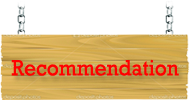
<style>
.page{position:relative;width:190px;height:100px;background:#ffffff}
.page>*{position:absolute;margin:0}
.t1{font:22.4px "Rockwell";color:#ff0100;scale:0.93 1}
</style>
<div class="page">
<p class="t1" style="left:11px;top:59px;width:168px;height:17px">Recommendation</p>
</div>
